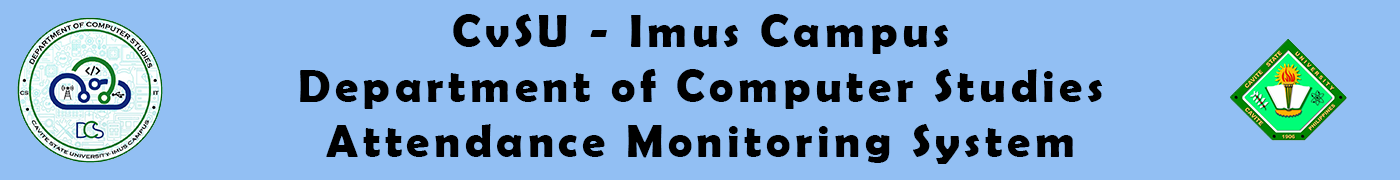
<style>
.page{position:relative;width:1400px;height:180px;background:#92bff3}
.page>*{position:absolute;margin:0}
.t1{font:45.8px "BerlinSansFBDemi-Bold";letter-spacing:0.1em;color:#000000}
</style>
<div class="page">
<p class="t1" style="left:300px;top:14px;width:802px;height:150px;text-align:center">CvSU - Imus Campus <br>Department of Computer Studies<br>Attendance Monitoring System</p>
</div>
